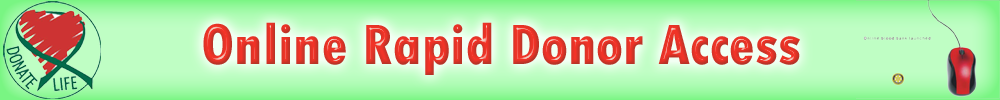
<style>
.page{position:relative;width:1000px;height:100px}
.page>*{position:absolute;margin:0}
.t1{font:60px "TwCenMT-CondensedExtraBold"}
</style>
<div class="page">
<p class="t1" style="left:203px;top:22px;width:597px;height:53px">Online Rapid Donor Access</p>
</div>
